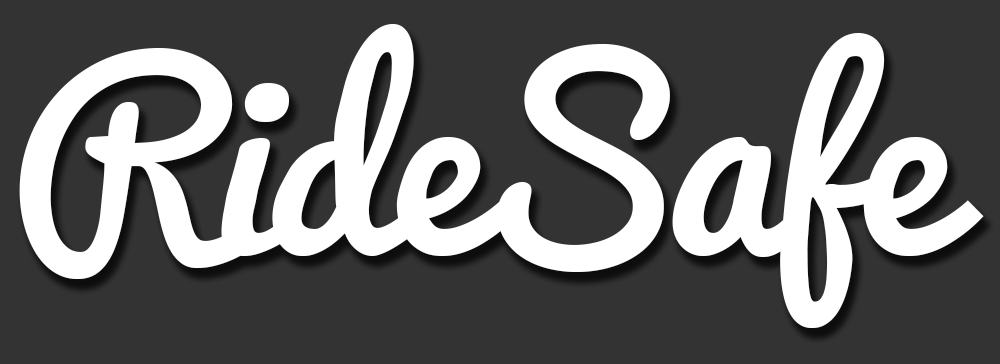
<style>
.page{position:relative;width:1000px;height:364px;background:#333333}
.page>*{position:absolute;margin:0}
.t1{font:247.2px "Pacifico";letter-spacing:-0.04em;color:#ffffff}
</style>
<div class="page">
<p class="t1" style="left:19px;top:24px;width:965px;height:304px">RideSafe</p>
</div>
